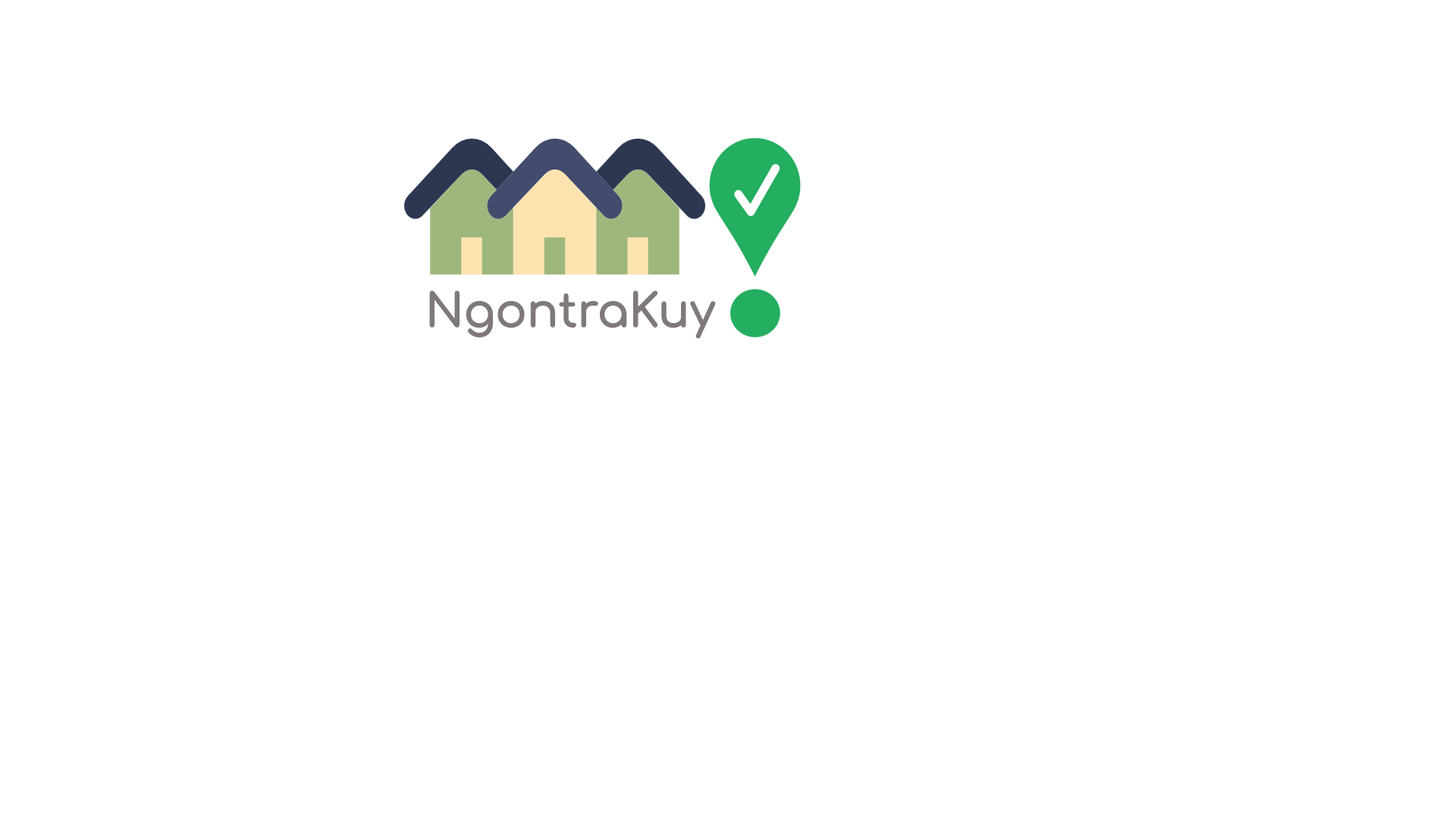
<style>
.page{position:relative;width:1456px;height:819px;background:#ffffff}
.page>*{position:absolute;margin:0}
.t1{font:45.5px "Comfortaa-Regular";letter-spacing:-0.01em;color:#807979;font-weight:bold}
</style>
<div class="page">
<p class="t1" style="left:429px;top:290px;width:287px;height:49px">NgontraKuy</p>
</div>
